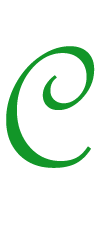
<style>
.page{position:relative;width:100px;height:250px;background:#ffffff}
.page>*{position:absolute;margin:0}
.t1{font:182.9px "FrenchScriptMT";color:#129628}
</style>
<div class="page">
<p class="t1" style="left:6px;top:46px;width:89px;height:122px">C</p>
</div>
